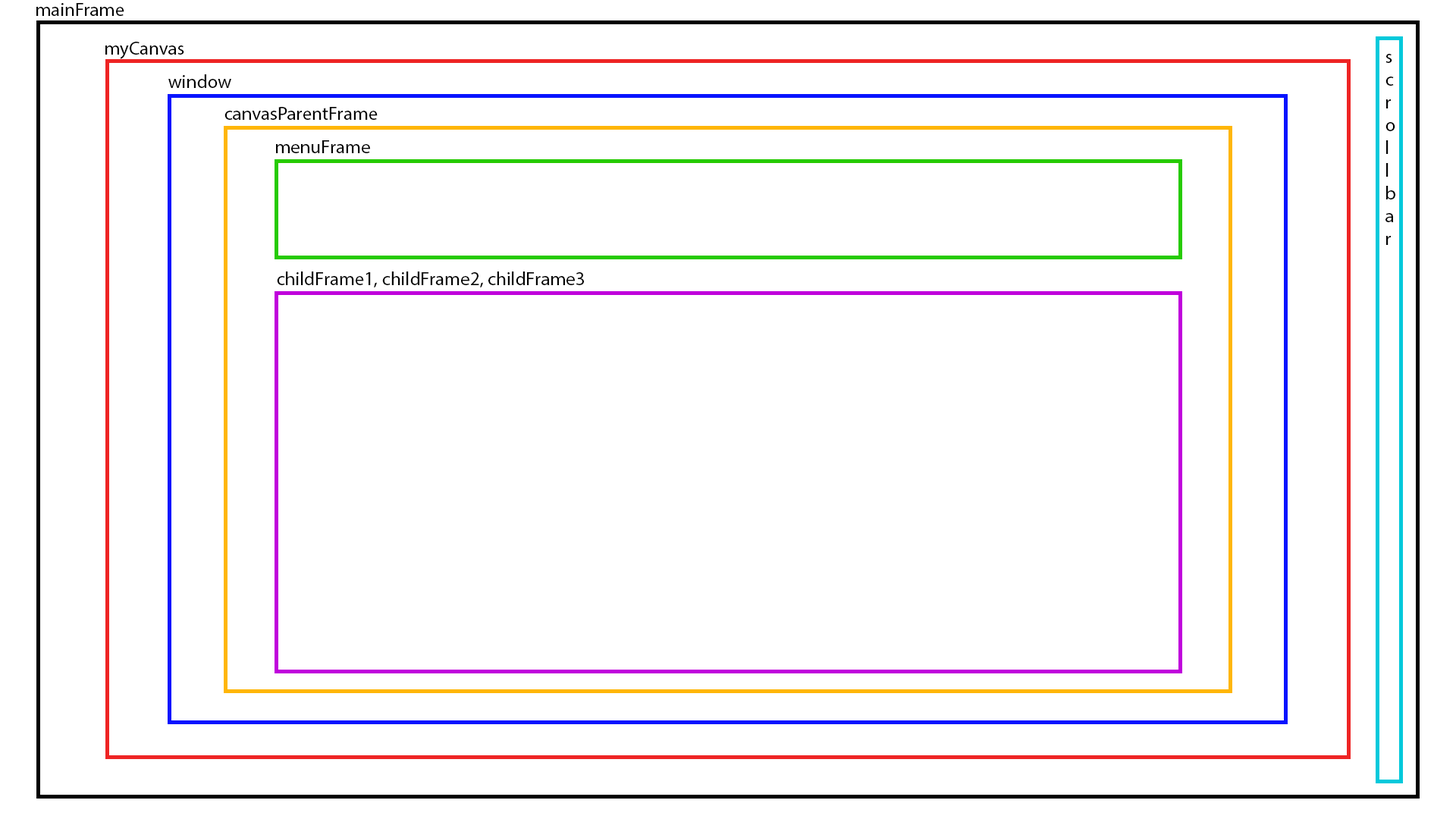
<style>
.page{position:relative;width:1456px;height:819px;background:#ffffff}
.page>*{position:absolute;margin:0}
.t1{font:19px "MyriadPro-Regular";color:#000000}
</style>
<div class="page">
<p class="t1" style="left:36px;top:3px;width:88px;height:13px">mainFrame</p>
<p class="t1" style="left:105px;top:42px;width:79px;height:17px">myCanvas</p>
<p class="t1" style="left:1385px;top:54px;width:10px;height:191px">s<br>c<br>r<br>o<br>l<br>l<br>b<br>a<br>r</p>
<p class="t1" style="left:168px;top:74px;width:63px;height:14px">window</p>
<p class="t1" style="left:224px;top:107px;width:154px;height:13px">canvasParentFrame</p>
<p class="t1" style="left:276px;top:140px;width:94px;height:13px">menuFrame</p>
<p class="t1" style="left:277px;top:271px;width:307px;height:16px">childFrame1, childFrame2, childFrame3</p>
</div>
